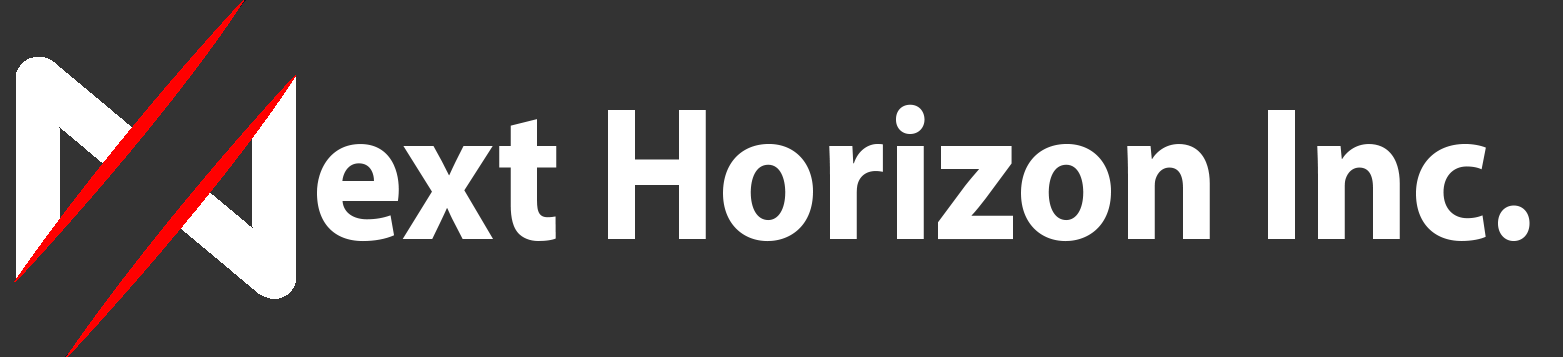
<style>
.page{position:relative;width:1563px;height:357px;background:#333333}
.page>*{position:absolute;margin:0}
.t1{font:191.7px "MyriadPro-Bold";color:#ffffff;scale:0.92 1}
</style>
<div class="page">
<p class="t1" style="left:317px;top:104px;width:1213px;height:138px">ext Horizon Inc.</p>
</div>
